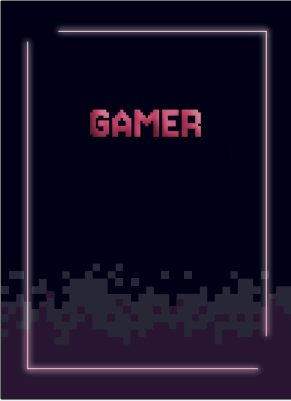
<style>
.page{position:relative;width:291px;height:401px;background:#000115}
.page>*{position:absolute;margin:0}
.t1{font:50px "Jersey10-Regular";letter-spacing:0.025em}
</style>
<div class="page">
<p class="t1" style="left:90px;top:109px;width:111px;height:28px">GAMER</p>
</div>
